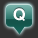
<style>
.page{position:relative;width:38px;height:38px;background:#333333}
.page>*{position:absolute;margin:0}
.t1{font:15.9px "HelveticaNeue-Bold";color:#ffffff}
</style>
<div class="page">
<p class="t1" style="left:13px;top:8px;width:12px;height:13px">Q</p>
</div>
